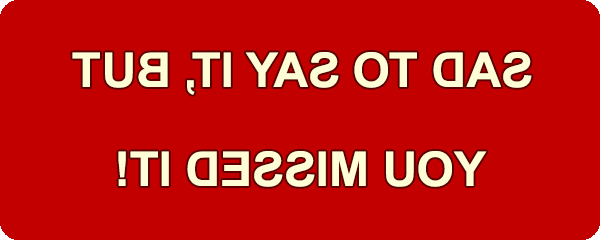
<style>
.page{position:relative;width:600px;height:240px;background:#c20000}
.page>*{position:absolute;margin:0}
.t1{font:48px "Arial-BoldMT";color:#fefdd6}
</style>
<div class="page">
<p class="t1" style="left:72px;top:52px;width:460px;height:43px;rotate:180deg">SAD TO SAY IT, BUT</p>
<p class="t1" style="left:118px;top:151px;width:369px;height:36px;rotate:180deg">YOU MISSED IT!</p>
</div>
